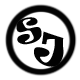
<style>
.page{position:relative;width:80px;height:80px;background:#ffffff}
.page>*{position:absolute;margin:0}
.t1{font:32px "Ravie";color:#030303}
.t2{font:40px "Ravie";color:#030303}
</style>
<div class="page">
<p class="t1" style="left:16px;top:17px;width:26px;height:28px;rotate:-13deg">S</p>
<p class="t2" style="left:34px;top:31px;width:30px;height:36px;rotate:19deg">J</p>
</div>
